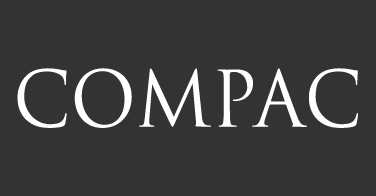
<style>
.page{position:relative;width:376px;height:196px;background:#333333}
.page>*{position:absolute;margin:0}
.t1{font:75.7px "TrajanPro-Regular";color:#ffffff;scale:0.95 1}
</style>
<div class="page">
<p class="t1" style="left:17px;top:68px;width:341px;height:60px">COMPAC</p>
</div>
